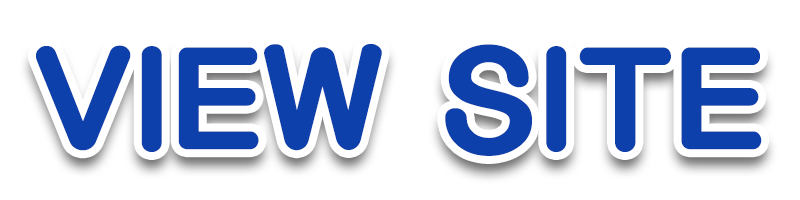
<style>
.page{position:relative;width:800px;height:200px;background:#ffffff}
.page>*{position:absolute;margin:0}
.t1{font:143.8px "KoreanSDNR-B";color:#0e40ab}
</style>
<div class="page">
<p class="t1" style="left:36px;top:44px;width:726px;height:112px">VIEW SITE</p>
</div>
